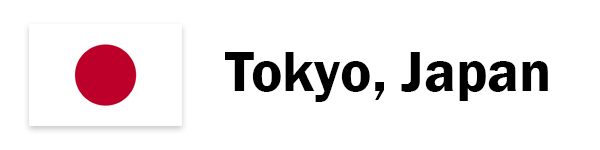
<style>
.page{position:relative;width:600px;height:150px;background:#ffffff}
.page>*{position:absolute;margin:0}
.t1{font:58.9px "FranklinGothic-Demi";color:#000000}
</style>
<div class="page">
<p class="t1" style="left:225px;top:52px;width:323px;height:50px">Tokyo, Japan</p>
</div>
